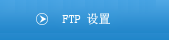
<style>
.page{position:relative;width:169px;height:40px}
.page>*{position:absolute;margin:0}
.t1{font:12px "SimSun";color:#fbfdfd}
</style>
<div class="page">
<p class="t1" style="left:62px;top:13px;width:48px;height:12px">FTP 设置</p>
</div>
